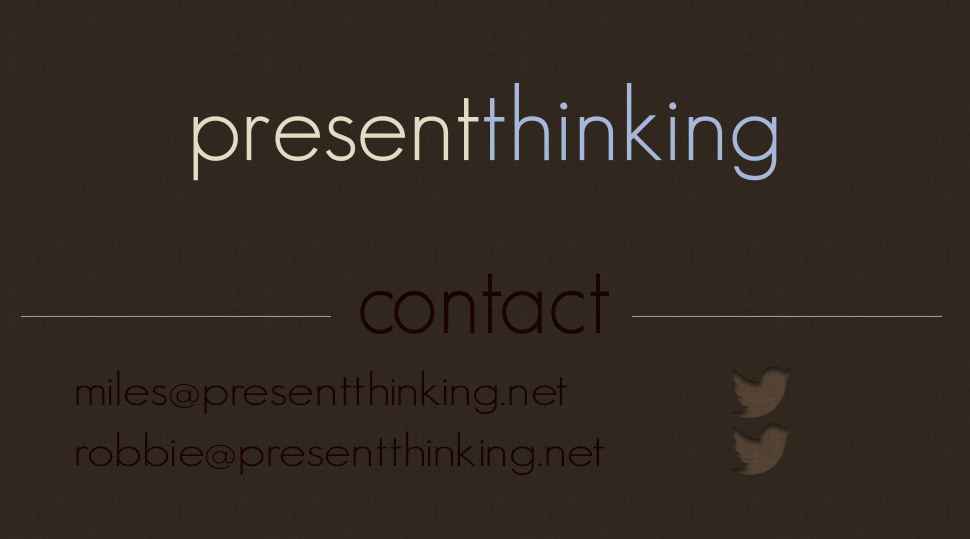
<style>
.page{position:relative;width:970px;height:539px;background:#31271e}
.page>*{position:absolute;margin:0}
.t1{font:103.8px "GeosansLight";color:#a8b6d8}
.t2{font:103.8px "GeosansLight";color:#e5dbc5}
.t3{font:100.1px "GeosansLight";color:#1a0300;scale:0.94 1}
.t4{font:46.8px "GeosansLight";color:#1a0300;scale:1.17 1}
</style>
<div class="page">
<p class="t1" style="left:193px;top:83px;width:584px;height:98px"><span class="t2">present</span>thinking</p>
<p class="t3" style="left:360px;top:273px;width:249px;height:61px">contact</p>
<p class="t4" style="left:76px;top:370px;width:492px;height:44px">miles@presentthinking.net</p>
<p class="t4" style="left:76px;top:431px;width:529px;height:44px">robbie@presentthinking.net</p>
</div>
